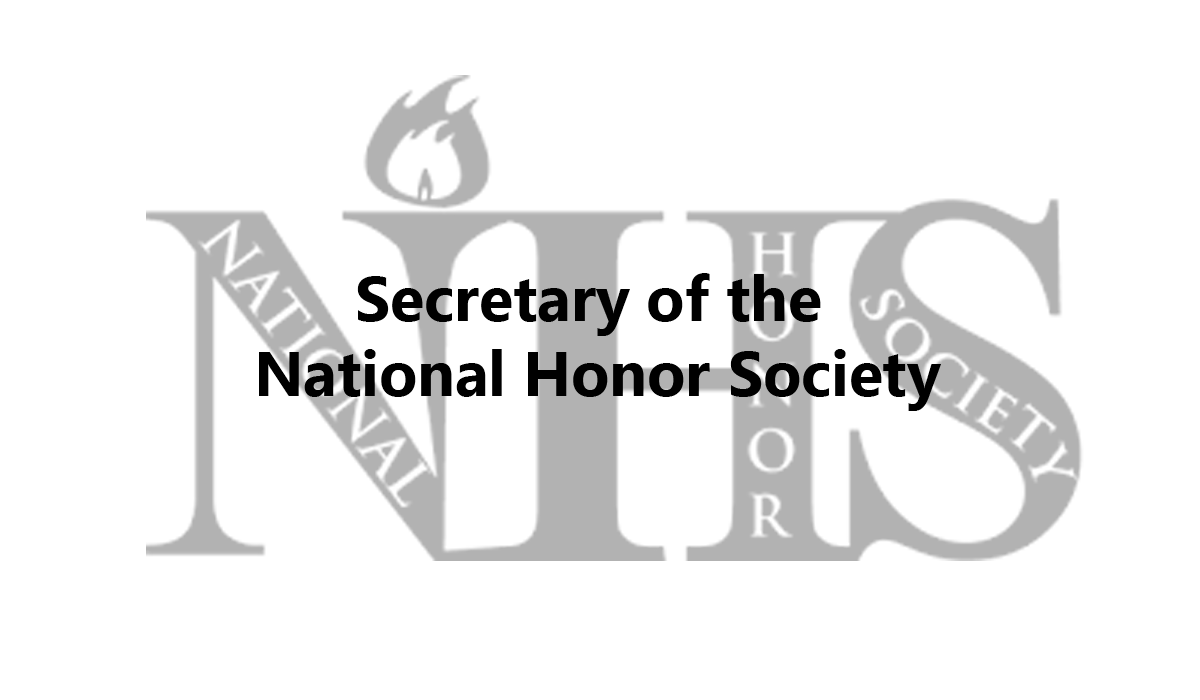
<style>
.page{position:relative;width:1200px;height:700px;background:#ffffff}
.page>*{position:absolute;margin:0}
.t1{font:62.5px "MicrosoftTaiLe-Bold";color:#000000}
</style>
<div class="page">
<p class="t1" style="left:259px;top:273px;width:682px;height:138px;text-align:center">Secretary of the <br>National Honor Society</p>
</div>
